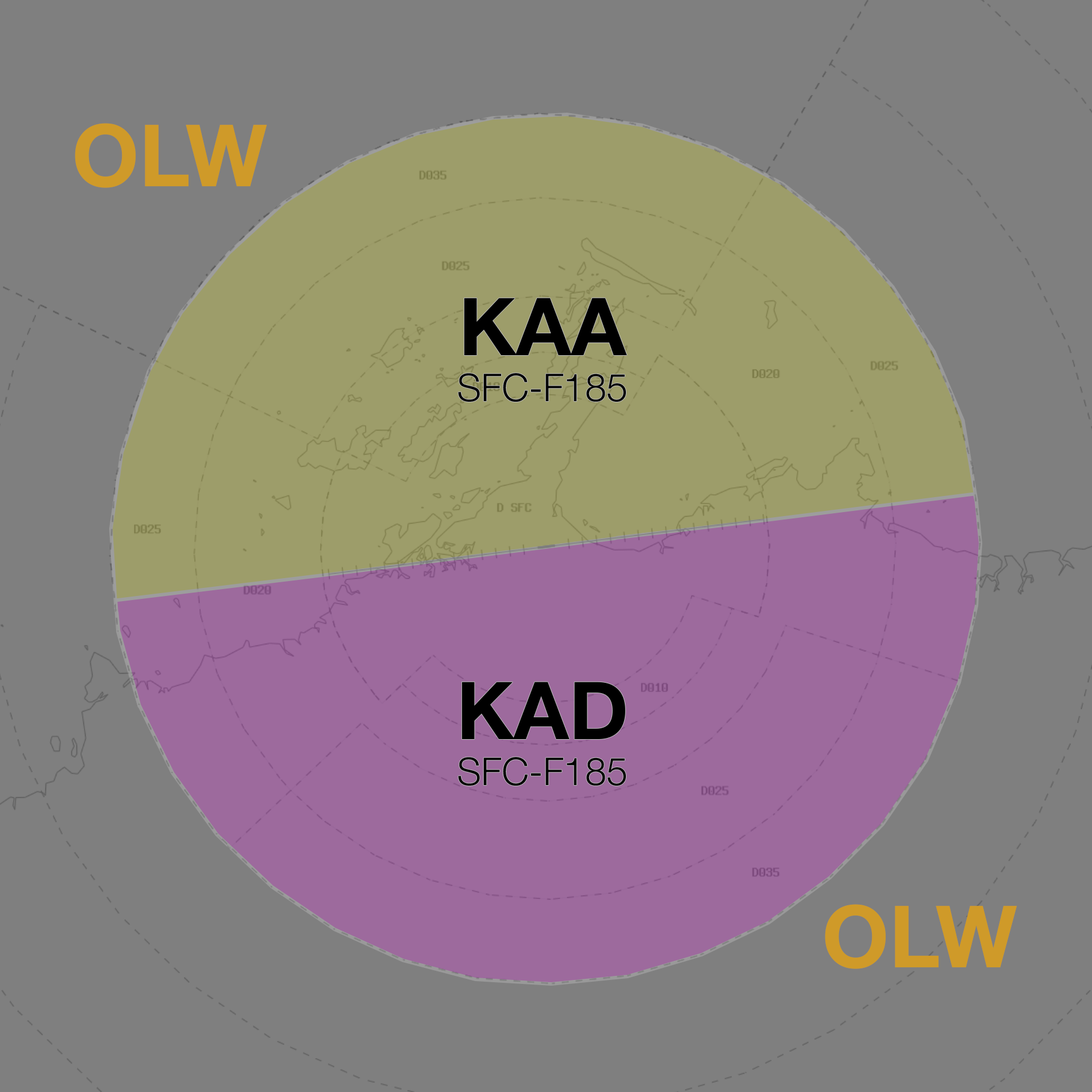
<style>
.page{position:relative;width:1092px;height:1092px;background:#7f7f7f}
.page>*{position:absolute;margin:0}
.t1{font:86.2px "HelveticaNeue-Bold";color:#cf9a29}
.t2{font:38.4px "HelveticaNeue-Light";color:#000000}
.t3{font:80px "HelveticaNeue-Bold";color:#000000}
</style>
<div class="page">
<p class="t1" style="left:75px;top:123px;width:192px;height:65px">OLW</p>
<p class="t2" style="left:458px;top:298px;width:169px;height:104px;text-align:center"><span class="t3">KAA<br></span>SFC-F185</p>
<p class="t2" style="left:458px;top:682px;width:168px;height:104px;text-align:center"><span class="t3">KAD<br></span>SFC-F185</p>
<p class="t1" style="left:825px;top:904px;width:192px;height:65px">OLW</p>
</div>
